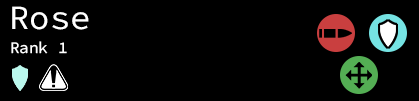
<style>
.page{position:relative;width:419px;height:101px;background:#000000}
.page>*{position:absolute;margin:0}
.t1{font:33.9px "SourceCodeVariable-Roman";color:#ffffff}
.t2{font:16px "SourceCodeVariable-Roman";color:#ffffff}
</style>
<div class="page">
<p class="t1" style="left:12px;top:6px;width:77px;height:24px">Rose</p>
<p class="t2" style="left:11px;top:41px;width:56px;height:13px">Rank 1</p>
</div>
